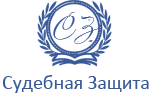
<style>
.page{position:relative;width:150px;height:100px;background:#ffffff}
.page>*{position:absolute;margin:0}
.t1{font:36px "AlexandraZeferinoOne";color:#395999}
.t2{font:20px "Calibri";color:#395999}
</style>
<div class="page">
<p class="t1" style="left:53px;top:12px;width:46px;height:32px">СЗ</p>
<p class="t2" style="left:2px;top:75px;width:147px;height:18px">Судебная Защита</p>
</div>
